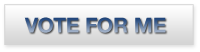
<style>
.page{position:relative;width:200px;height:52px}
.page>*{position:absolute;margin:0}
.t1{font:20.7px "HelveticaNeueLTStd-Bd"}
</style>
<div class="page">
<p class="t1" style="left:24px;top:17px;width:142px;height:16px">VOTE FOR ME</p>
</div>
